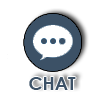
<style>
.page{position:relative;width:105px;height:105px;background:#ffffff}
.page>*{position:absolute;margin:0}
.t1{font:18px "CenturyGothic-Bold";color:#3c5166}
</style>
<div class="page">
<p class="t1" style="left:29px;top:77px;width:47px;height:13px">CHAT</p>
</div>
